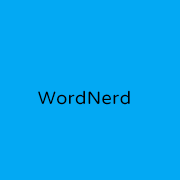
<style>
.page{position:relative;width:180px;height:180px;background:#03a9f3}
.page>*{position:absolute;margin:0}
.t1{font:18px "VarelaRound";letter-spacing:0.025em;color:#000000}
</style>
<div class="page">
<p class="t1" style="left:38px;top:90px;width:92px;height:15px">WordNerd</p>
</div>
